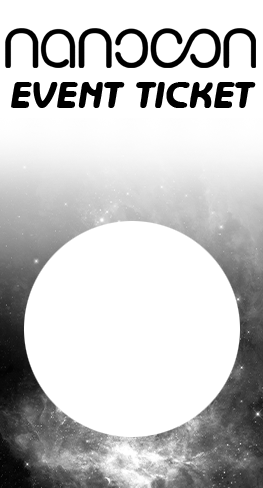
<style>
.page{position:relative;width:263px;height:488px;background:#ffffff}
.page>*{position:absolute;margin:0}
.t1{font:37.3px "Tubular-Regular";color:#000000}
</style>
<div class="page">
<p class="t1" style="left:11px;top:82px;width:245px;height:26px">EVENT TICKET</p>
</div>
